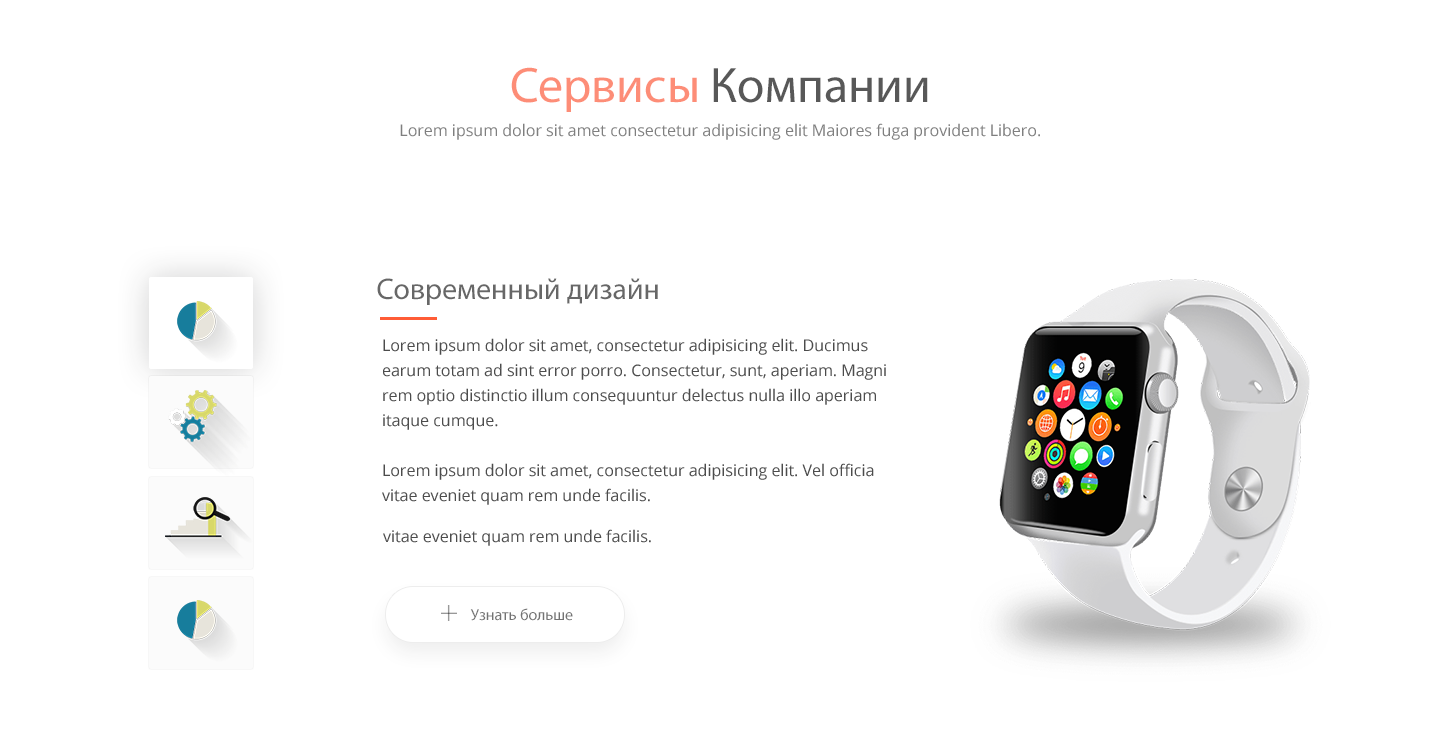
<style>
.page{position:relative;width:1440px;height:740px;background:#ffffff}
.page>*{position:absolute;margin:0}
.t1{font:50px "MyriadPro-Regular"}
.t2{font:16px "OpenSans";color:#7f7f7f}
.t3{font:30px "MyriadPro-Regular";color:#676767}
.t4{font:16px/25px "OpenSans";color:#4c4c4c}
.t5{font:16px "OpenSans";color:#4c4c4c}
.t6{font:16px "MyriadPro-Regular";color:#737373}
</style>
<div class="page">
<p class="t1" style="left:511px;top:67px;width:417px;height:45px">Сервисы Компании</p>
<p class="t2" style="left:400px;top:123px;width:640px;height:17px">Lorem ipsum dolor sit amet consectetur adipisicing elit Maiores fuga provident Libero.</p>
<p class="t3" style="left:377px;top:278px;width:281px;height:27px">Современный дизайн</p>
<p class="t4" style="left:382px;top:338px;width:504px;height:167px">Lorem ipsum dolor sit amet, consectetur adipisicing elit. Ducimus earum totam ad sint error porro. Consectetur, sunt, aperiam. Magni rem optio distinctio illum consequuntur delectus nulla illo aperiam itaque cumque.<br><br>Lorem ipsum dolor sit amet, consectetur adipisicing elit. Vel officia vitae eveniet quam rem unde facilis.</p>
<p class="t5" style="left:383px;top:529px;width:268px;height:17px">vitae eveniet quam rem unde facilis.</p>
<p class="t6" style="left:470px;top:608px;width:103px;height:13px">Узнать больше</p>
</div>
